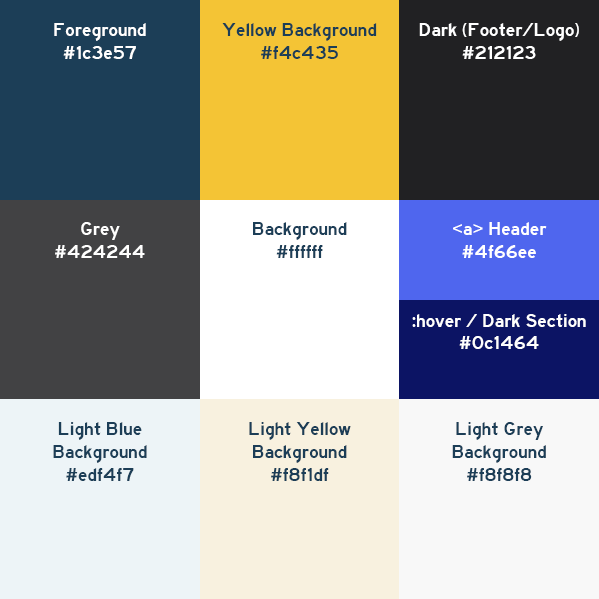
<style>
.page{position:relative;width:599px;height:599px}
.page>*{position:absolute;margin:0}
.t1{font:19px "HighwayGothicWide";color:#ffffff}
.t2{font:19px "HighwayGothicWide";color:#1c3e57}
</style>
<div class="page">
<p class="t1" style="left:54px;top:23px;width:92px;height:36px;text-align:center">Foreground<br>#1c3e57</p>
<p class="t2" style="left:222px;top:23px;width:155px;height:36px;text-align:center">Yellow Background<br>#f4c435</p>
<p class="t1" style="left:419px;top:23px;width:160px;height:36px;text-align:center">Dark (Footer/Logo)<br>#212123</p>
<p class="t1" style="left:55px;top:222px;width:90px;height:36px;text-align:center">Grey<br>#424244</p>
<p class="t2" style="left:253px;top:222px;width:94px;height:36px;text-align:center"><span class="t1"><br></span>Background<br>#ffffff</p>
<p class="t1" style="left:412px;top:222px;width:174px;height:127px;text-align:center">&lt;a&gt; Header<br>#4f66ee<br><br><br>:hover / Dark Section<br>#0c1464</p>
<p class="t2" style="left:53px;top:422px;width:94px;height:59px;text-align:center">Light Blue <br>Background<br>#edf4f7</p>
<p class="t2" style="left:249px;top:422px;width:102px;height:59px;text-align:center">Light Yellow<br>Background<br>#f8f1df</p>
<p class="t2" style="left:452px;top:422px;width:94px;height:59px;text-align:center">Light Grey<br>Background<br>#f8f8f8</p>
</div>
